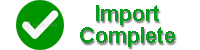
<style>
.page{position:relative;width:200px;height:50px;background:#ffffff}
.page>*{position:absolute;margin:0}
.t1{font:22px "Arial-BoldMT";color:#0c9a23}
</style>
<div class="page">
<p class="t1" style="left:96px;top:5px;width:63px;height:20px">Import</p>
<p class="t1" style="left:80px;top:27px;width:95px;height:20px">Complete</p>
</div>
